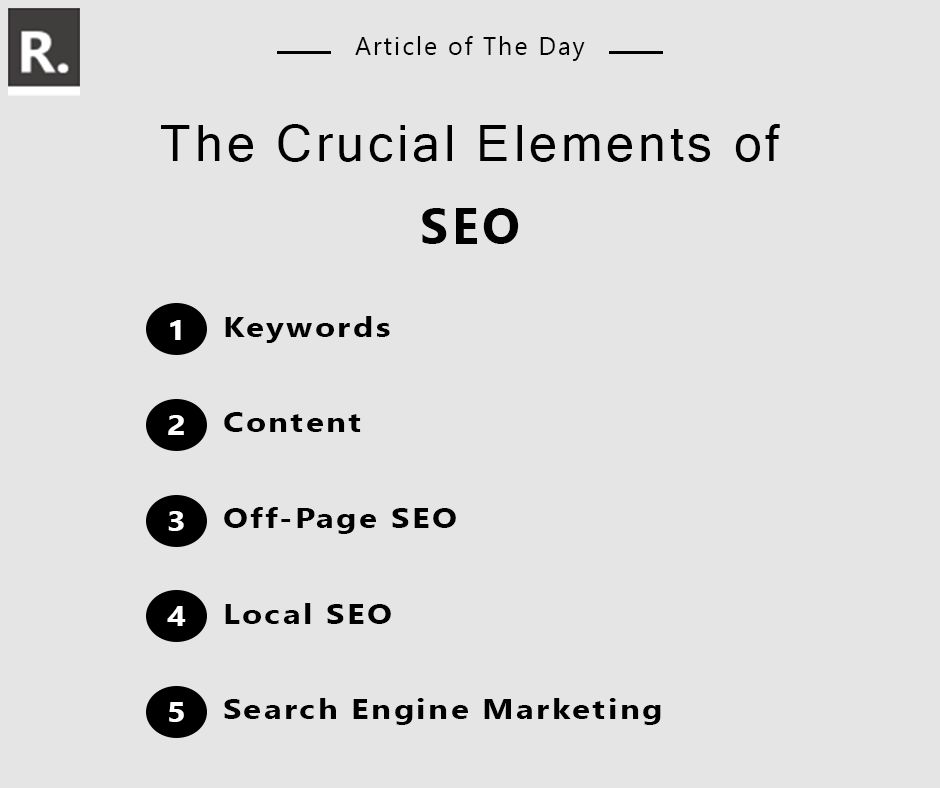
<style>
.page{position:relative;width:940px;height:788px;background:#e5e5e5}
.page>*{position:absolute;margin:0}
.t1{font:25px "SegoeUI";letter-spacing:0.08em;color:#000000}
.t2{font:49.8px/82.8px "MicrosoftSansSerif";letter-spacing:0.08em;color:#000000}
.t3{font:49.8px/82.8px "SegoeUI-Bold";letter-spacing:0.08em;color:#000000}
.t4{font:27.8px "SegoeUI-Bold";letter-spacing:0.08em;color:#000000;scale:1.17 1}
.t5{font:27.8px "SegoeUI-Bold";letter-spacing:0.08em;color:#ffffff;scale:1.17 1}
</style>
<div class="page">
<p class="t1" style="left:355px;top:36px;width:230px;height:25px">Article of The Day</p>
<p class="t2" style="left:161px;top:124px;width:619px;height:120px;text-align:center">The Crucial Elements of <span class="t3">SEO</span></p>
<p class="t4" style="left:225px;top:316px;width:165px;height:27px">Keywords</p>
<p class="t5" style="left:170px;top:320px;width:11px;height:20px">1</p>
<p class="t4" style="left:224px;top:412px;width:137px;height:20px">Content</p>
<p class="t5" style="left:168px;top:415px;width:16px;height:20px">2</p>
<p class="t4" style="left:224px;top:507px;width:232px;height:27px">Off-Page SEO</p>
<p class="t5" style="left:168px;top:511px;width:16px;height:20px">3</p>
<p class="t5" style="left:167px;top:606px;width:19px;height:20px">4</p>
<p class="t4" style="left:225px;top:603px;width:166px;height:21px">Local SEO</p>
<p class="t5" style="left:169px;top:702px;width:15px;height:20px">5</p>
<p class="t4" style="left:224px;top:698px;width:437px;height:27px">Search Engine Marketing</p>
</div>
